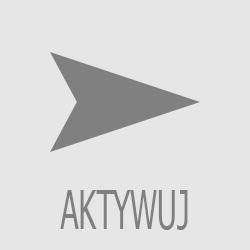
<style>
.page{position:relative;width:250px;height:250px;background:#e6e6e6}
.page>*{position:absolute;margin:0}
.t1{font:53px "Tahoma";color:#808080;scale:0.57 1}
</style>
<div class="page">
<p class="t1" style="left:60px;top:190px;width:128px;height:40px">AKTYWUJ</p>
</div>
